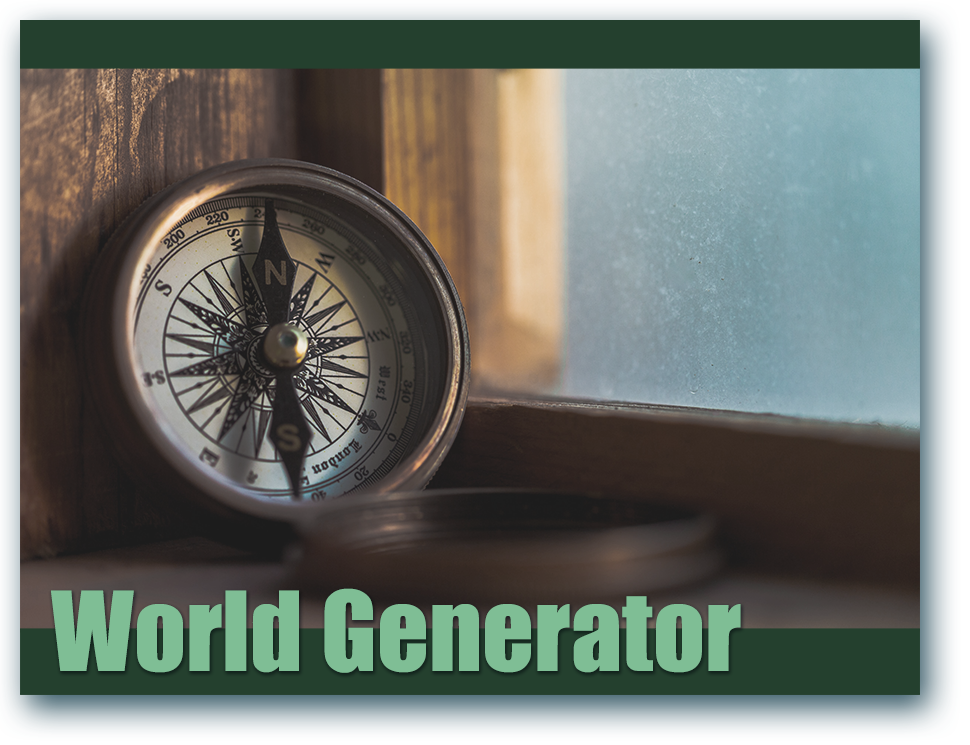
<style>
.page{position:relative;width:970px;height:745px}
.page>*{position:absolute;margin:0}
.t1{font:101.8px "Impact";color:#7fbe95}
</style>
<div class="page">
<p class="t1" style="left:51px;top:588px;width:690px;height:85px">World Generator</p>
</div>
